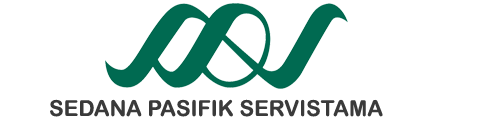
<style>
.page{position:relative;width:500px;height:120px;background:#ffffff}
.page>*{position:absolute;margin:0}
.t1{font:22px "ArialRoundedMTBold";color:#3a3a3a}
</style>
<div class="page">
<p class="t1" style="left:50px;top:99px;width:333px;height:18px">SEDANA PASIFIK SERVISTAMA</p>
</div>
